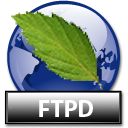
<style>
.page{position:relative;width:128px;height:128px}
.page>*{position:absolute;margin:0}
.t1{font:24px "Myriad-Bold";color:#ffffff}
</style>
<div class="page">
<p class="t1" style="left:39px;top:100px;width:54px;height:17px">FTPD</p>
</div>
